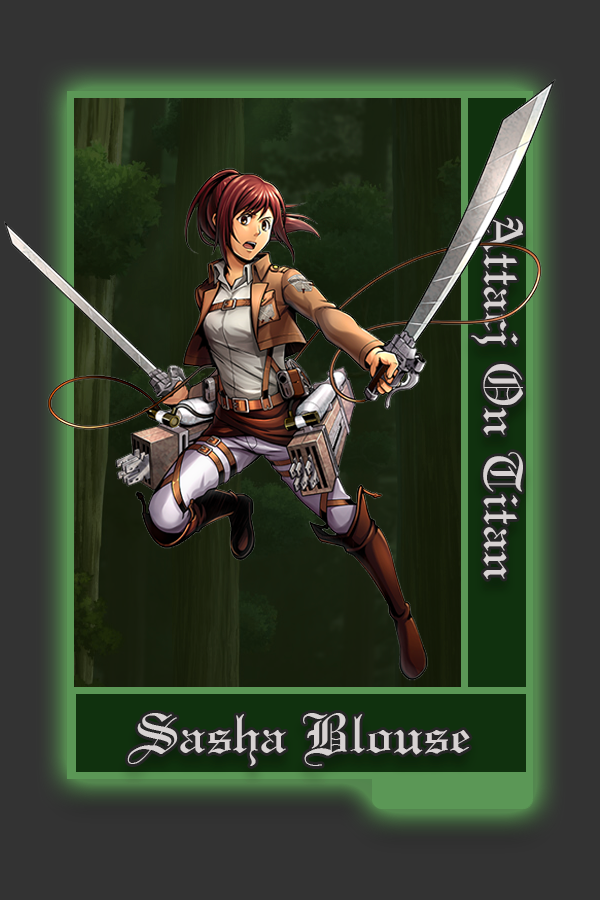
<style>
.page{position:relative;width:600px;height:900px;background:#333333}
.page>*{position:absolute;margin:0}
.t1{font:58.3px "Linotext";color:#d7d3d3}
.t2{font:60.6px "Linotext";color:#d7d3d3}
</style>
<div class="page">
<p class="t1" style="left:471px;top:206px;width:52px;height:373px;rotate:90deg">Attacj On Titan</p>
<p class="t2" style="left:127px;top:713px;width:343px;height:53px">Sasha Blouse</p>
</div>
